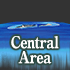
<style>
.page{position:relative;width:70px;height:70px;background:#333333}
.page>*{position:absolute;margin:0}
.t1{font:16px/15px "RyuminPro-ExBold";letter-spacing:-0.04em;color:#ffffff;scale:0.9 1}
</style>
<div class="page">
<p class="t1" style="left:11px;top:36px;width:48px;height:28px;text-align:center">Central<br>Area</p>
</div>
